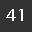
<style>
.page{position:relative;width:32px;height:32px;background:#333333}
.page>*{position:absolute;margin:0}
.t1{font:17.8px "MyriadPro-Regular";color:#ffffff;scale:1.12 1}
</style>
<div class="page">
<p class="t1" style="left:6px;top:9px;width:17px;height:12px">41</p>
</div>
